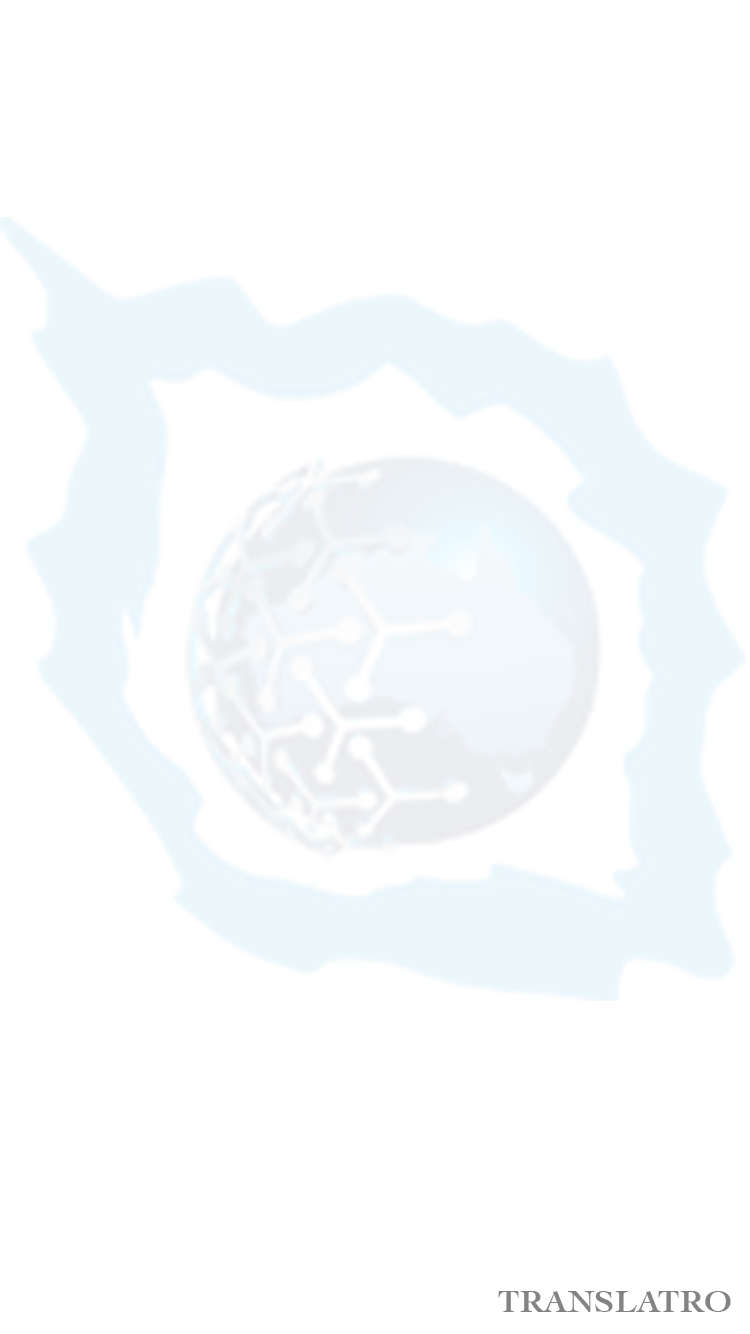
<style>
.page{position:relative;width:750px;height:1334px;background:#ffffff}
.page>*{position:absolute;margin:0}
.t1{font:33.3px "Cochin-Bold";letter-spacing:0.005em;color:#838383;text-transform:uppercase}
</style>
<div class="page">
<p class="t1" style="left:498px;top:1291px;width:233px;height:21px">Translatro</p>
</div>
